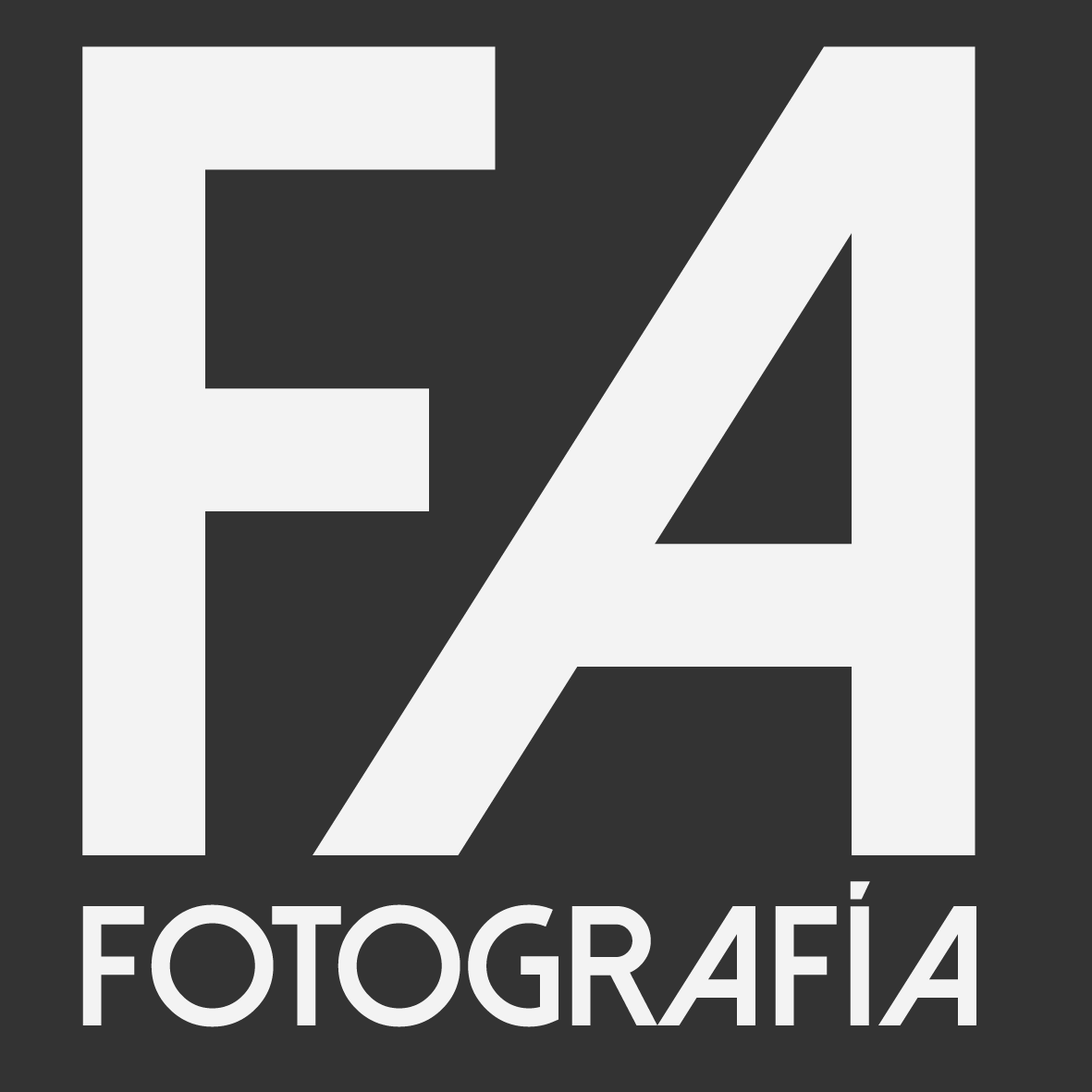
<style>
.page{position:relative;width:1092px;height:1092px;background:#333333}
.page>*{position:absolute;margin:0}
.t1{font:1157px "DolceVitaHeavy-Bold";color:#ffffff}
.t2{font:170.6px "DolceVitaHeavy-Bold";color:#ffffff}
</style>
<div class="page">
<p class="t1" style="left:82px;top:46px;width:893px;height:809px;opacity:0.94">FA</p>
<p class="t2" style="left:82px;top:881px;width:894px;height:146px;opacity:0.94">FOTOGRAFÍA</p>
</div>
